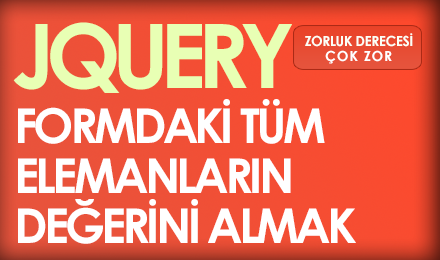
<style>
.page{position:relative;width:440px;height:260px}
.page>*{position:absolute;margin:0}
.t1{font:89px "CenturyGothic-Bold";letter-spacing:-0.1em;color:#e8ffb4;text-transform:uppercase}
.t2{font:14px "CenturyGothic-Bold";letter-spacing:-0.04em;color:#fcfff6;text-transform:uppercase}
.t3{font:14px "CenturyGothic-Bold";letter-spacing:0.06em;color:#ffffff;text-transform:uppercase}
.t4{font:48px/50px "CenturyGothic-Bold";letter-spacing:-0.08em;color:#ffffff;text-transform:uppercase}
</style>
<div class="page">
<p class="t1" style="left:13px;top:22px;width:279px;height:71px">jquery</p>
<p class="t2" style="left:305px;top:33px;width:108px;height:14px">zorluk Derecesİ</p>
<p class="t3" style="left:325px;top:50px;width:67px;height:14px">çok zor</p>
<p class="t4" style="left:18px;top:99px;width:338px;height:145px">formdakİ tüm<br>elemanların<br>değerİNİ almak</p>
</div>
